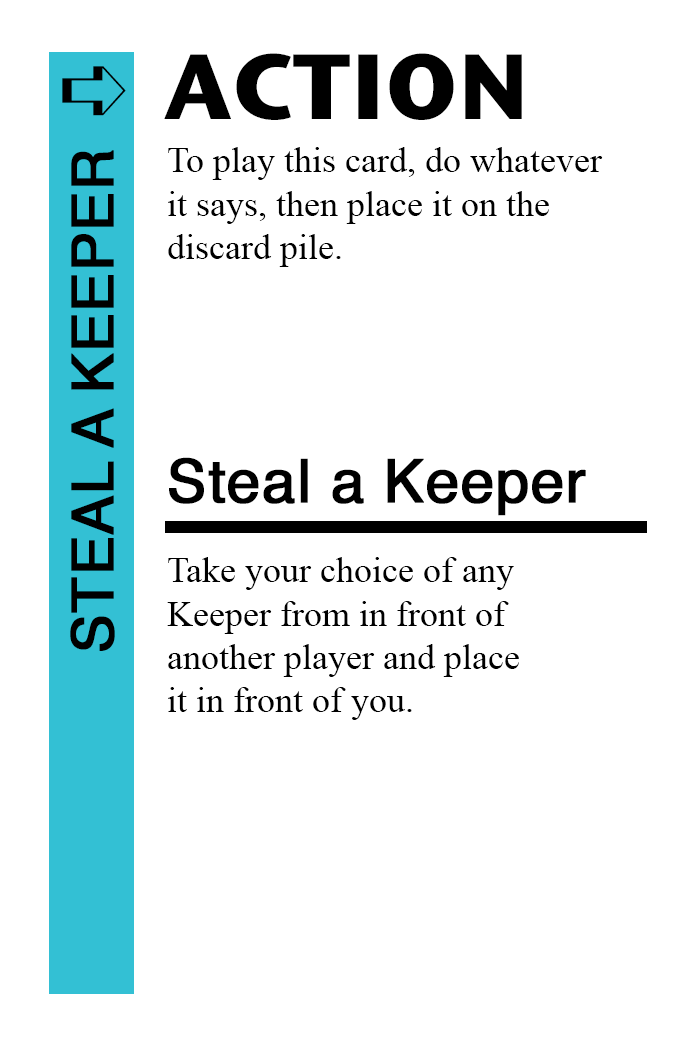
<style>
.page{position:relative;width:700px;height:1042px;background:#ffffff}
.page>*{position:absolute;margin:0}
.t1{font:92px "StoneSansITC-Bold";color:#000000}
.t2{font:82px "MS-Gothic";color:#000000}
.t3{font:58px "Helvetica";color:#000000;font-weight:bold}
.t4{font:36px "TimesNewRomanPSMT";color:#000000}
.t5{font:60px "Helvetica";color:#000000;font-weight:bold}
</style>
<div class="page">
<p class="t1" style="left:164px;top:53px;width:358px;height:67px">ACTION</p>
<p class="t2" style="left:62px;top:66px;width:64px;height:50px">➪</p>
<p class="t3" style="left:70px;top:150px;width:45px;height:501px;rotate:-90deg">STEAL A KEEPER</p>
<p class="t4" style="left:168px;top:147px;width:435px;height:120px">To play this card, do whatever<br>it says, then place it on the<br>discard pile.</p>
<p class="t5" style="left:169px;top:457px;width:417px;height:59px">Steal a Keeper</p>
<p class="t4" style="left:167px;top:557px;width:352px;height:163px">Take your choice of any<br>Keeper from in front of <br>another player and place<br>it in front of you.</p>
</div>
